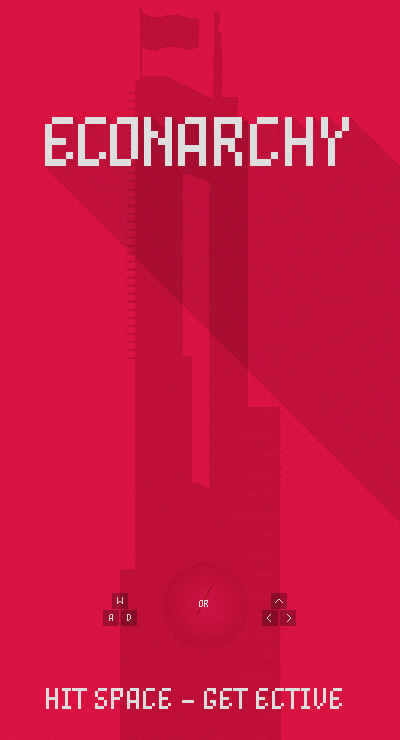
<style>
.page{position:relative;width:400px;height:740px}
.page>*{position:absolute;margin:0}
.t1{font:56px "Unibody8Pro-RegularItalic";letter-spacing:-0.085em;color:#dedede;text-transform:uppercase}
.t2{font:8px "Unibody8Pro-RegularItalic";letter-spacing:-0.085em;color:#dcdcdc;text-transform:uppercase}
.t3{font:24px "Unibody8Pro-RegularItalic";letter-spacing:-0.085em;color:#dddddd;text-transform:uppercase}
</style>
<div class="page">
<p class="t1" style="left:45px;top:117px;width:304px;height:49px">ECONARCHY</p>
<p class="t2" style="left:117px;top:597px;width:6px;height:7px">W</p>
<p class="t2" style="left:199px;top:600px;width:9px;height:7px">OR</p>
<p class="t2" style="left:109px;top:614px;width:4px;height:7px">A</p>
<p class="t2" style="left:127px;top:614px;width:4px;height:7px">D</p>
<p class="t3" style="left:46px;top:688px;width:296px;height:21px">HIT SPACE - GET ECTIVE</p>
</div>
